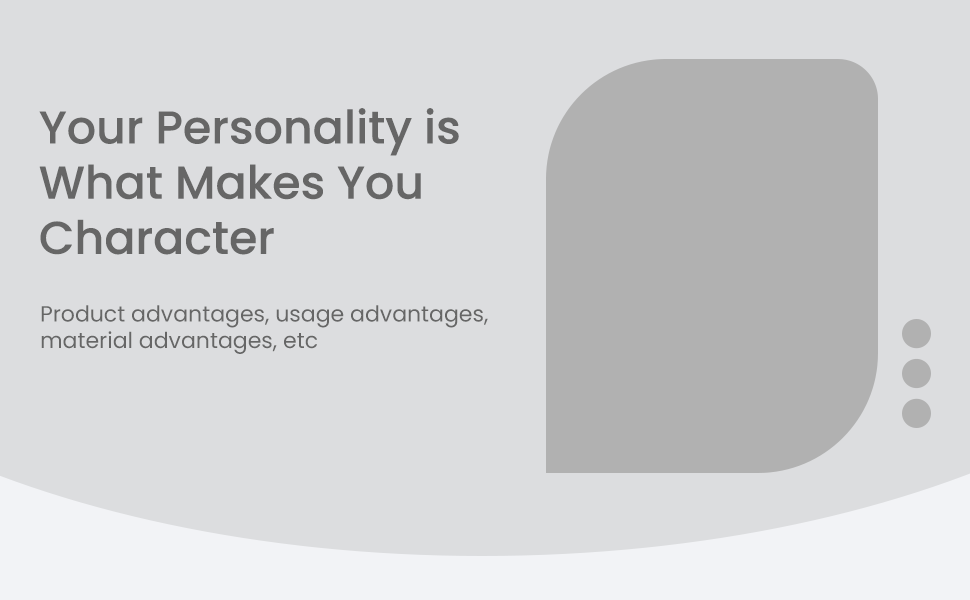
<style>
.page{position:relative;width:970px;height:600px;background:#dcdddf}
.page>*{position:absolute;margin:0}
.t1{font:46px "Poppins-Medium";color:#666666}
.t2{font:22px "Poppins-Regular";color:#666666}
</style>
<div class="page">
<p class="t1" style="left:39px;top:108px;width:420px;height:147px">Your Personality is<br>What Makes You<br>Character</p>
<p class="t2" style="left:41px;top:305px;width:447px;height:49px">Product advantages, usage advantages, <br>material advantages, etc</p>
</div>
